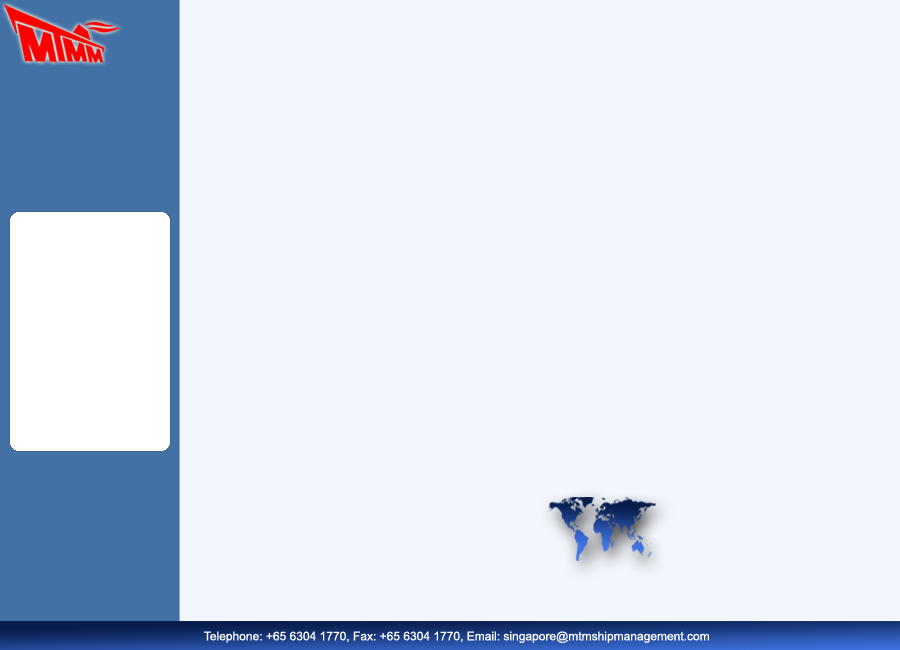
<style>
.page{position:relative;width:900px;height:650px;background:#f3f6fd}
.page>*{position:absolute;margin:0}
.t1{font:12px "ArialMT";color:#ffffff}
</style>
<div class="page">
<p class="t1" style="left:204px;top:631px;width:505px;height:12px">Telephone: +65 6304 1770, Fax: +65 6304 1770, Email: singapore@mtmshipmanagement.com</p>
</div>
